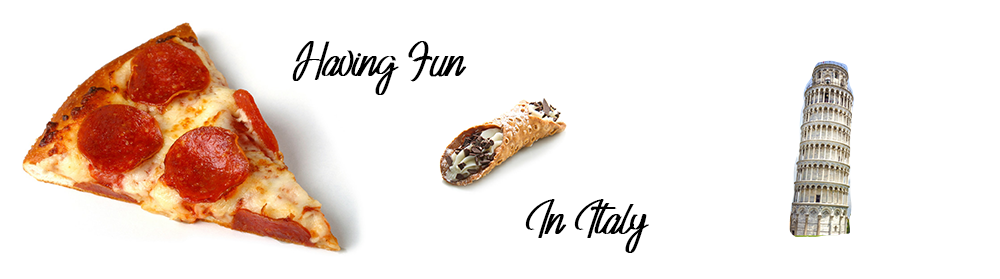
<style>
.page{position:relative;width:1000px;height:279px;background:#ffffff}
.page>*{position:absolute;margin:0}
.t1{font:36px "Adventure";color:#000000}
</style>
<div class="page">
<p class="t1" style="left:292px;top:41px;width:175px;height:54px">Having Fun</p>
<p class="t1" style="left:525px;top:199px;width:124px;height:54px">In Italy</p>
</div>
